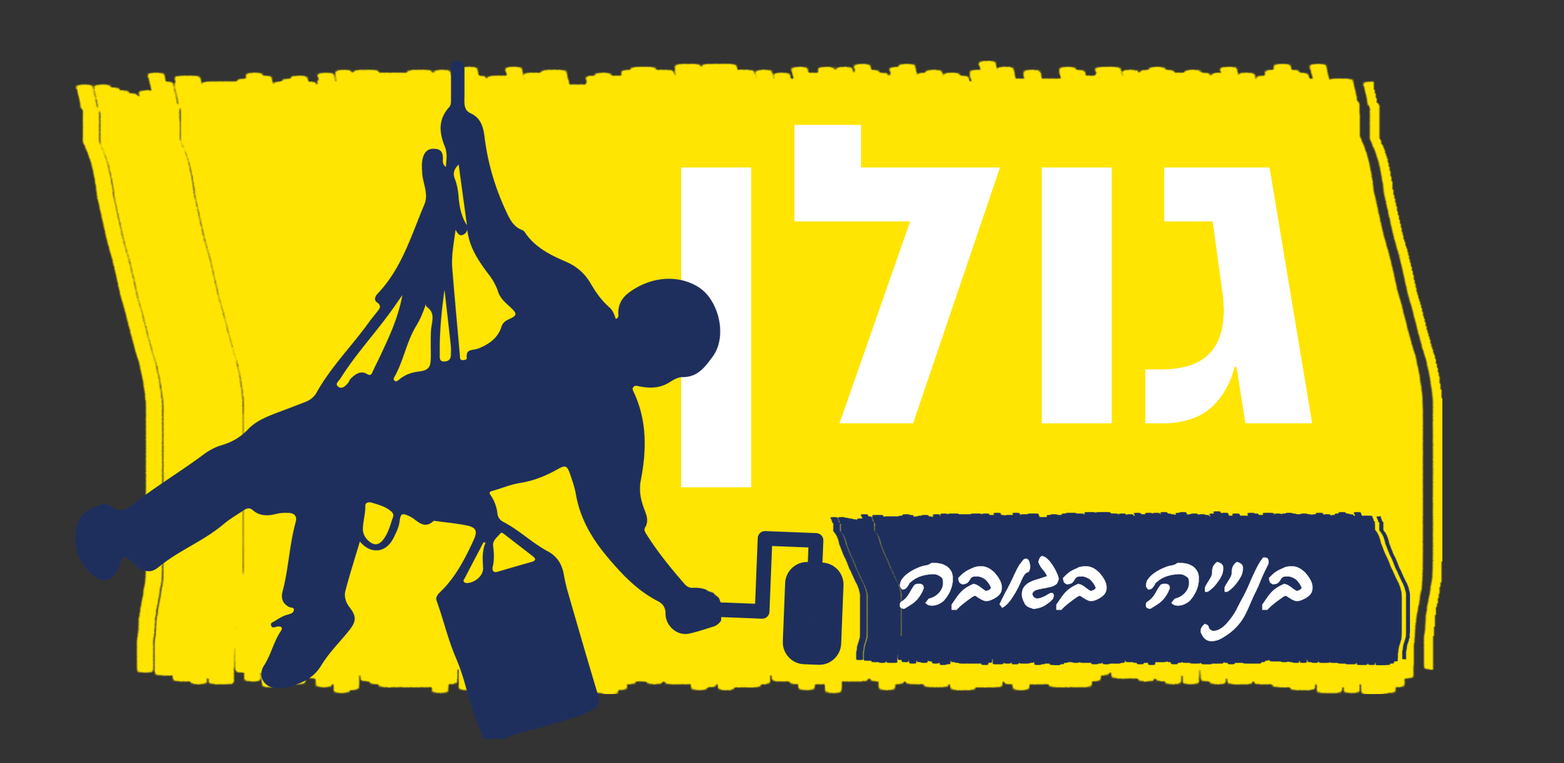
<style>
.page{position:relative;width:1564px;height:763px;background:#ffe501}
.page>*{position:absolute;margin:0}
.t1{font:493.2px "AlmoniNeueDL4.0AAA-Bold";color:#ffffff}
.t2{font:144.4px "FbAspaklarya-Bold";color:#ffffff}
</style>
<div class="page">
<p class="t1" style="left:681px;top:124px;width:631px;height:363px">גולן</p>
<p class="t2" style="left:900px;top:555px;width:413px;height:86px">בנייה בגובה</p>
</div>
